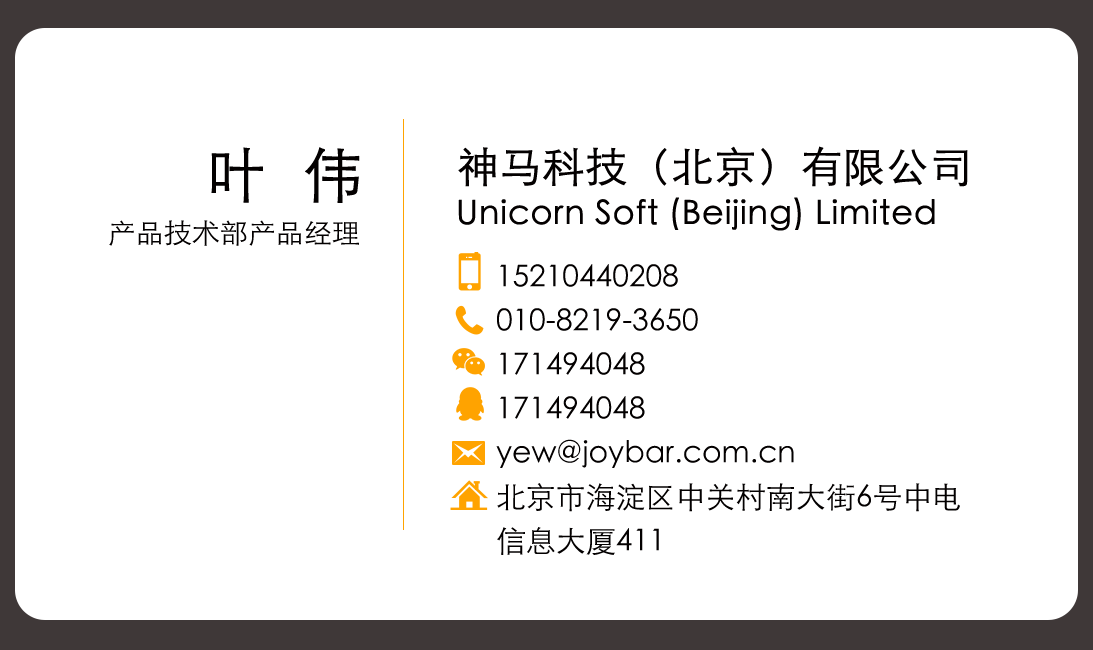
<style>
.page{position:relative;width:1093px;height:650px;background:#ffffff}
.page>*{position:absolute;margin:0}
.t1{font:59.7px "STHeitiSC-Light";color:#030000;font-weight:bold}
.t2{font:41.7px "STHeitiSC-Light";color:#030000;font-weight:bold}
.t3{font:33.3px "STHeitiSC-Light";color:#030000;font-weight:bold}
.t4{font:27.9px "STHeitiSC-Light";color:#030000}
.t5{font:30px/44px "STHeitiSC-Light";color:#030000}
</style>
<div class="page">
<p class="t1" style="left:211px;top:147px;width:149px;height:56px">叶  伟</p>
<p class="t2" style="left:458px;top:146px;width:510px;height:41px">神马科技（北京）有限公司</p>
<p class="t3" style="left:458px;top:197px;width:477px;height:34px">Unicorn Soft (Beijing) Limited</p>
<p class="t4" style="left:109px;top:220px;width:250px;height:26px">产品技术部产品经理</p>
<p class="t5" style="left:496px;top:264px;width:464px;height:291px">15210440208<br>010-8219-3650<br>171494048<br>171494048<br>yew@joybar.com.cn<br>北京市海淀区中关村南大街6号中电<br>信息大厦411</p>
</div>
